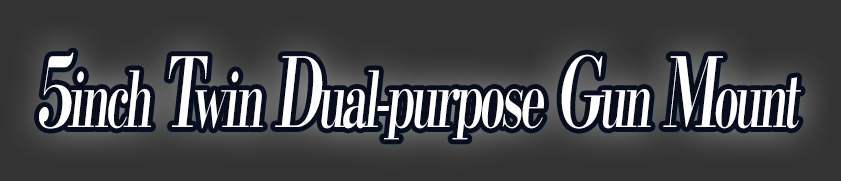
<style>
.page{position:relative;width:841px;height:181px;background:#333333}
.page>*{position:absolute;margin:0}
.t1{font:76.8px "KochoStd-Heavy";letter-spacing:-0.08em;color:#ffffff;font-style:italic;scale:0.6 1}
.t2{font:96px "KochoStd-Heavy";letter-spacing:-0.08em;color:#ffffff;font-style:italic;scale:0.6 1}
</style>
<div class="page">
<p class="t1" style="left:39px;top:52px;width:762px;height:88px"><span class="t2">5</span>inch<span class="t2"> T</span>win<span class="t2"> D</span>ual-purpose<span class="t2"> G</span>un<span class="t2"> M</span>ount</p>
</div>
